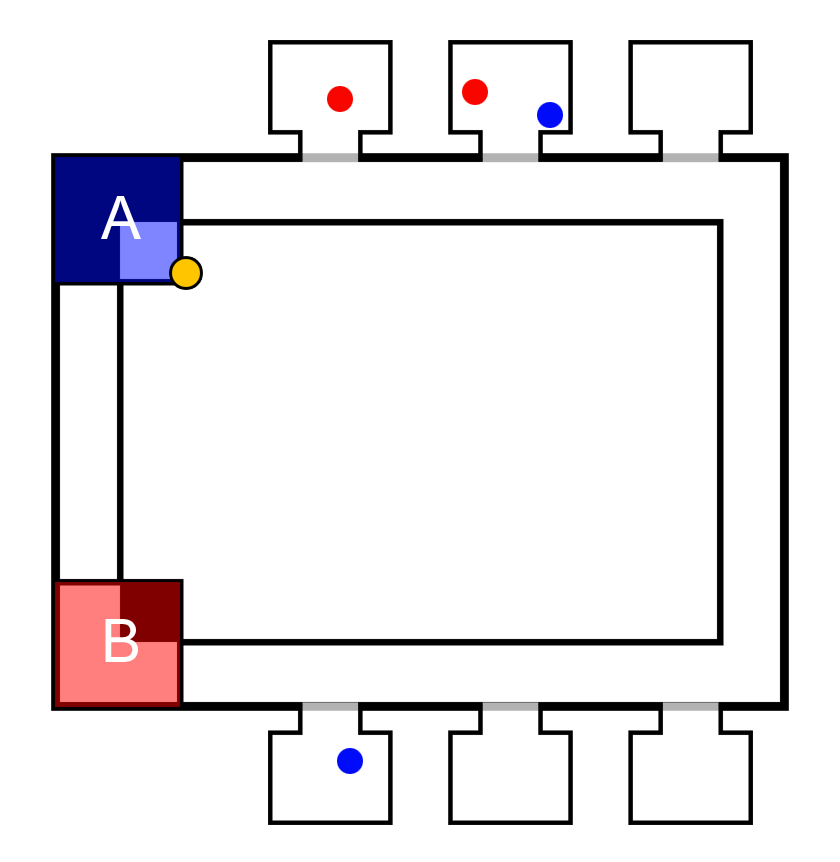
<style>
.page{position:relative;width:840px;height:862px;background:#ffffff}
.page>*{position:absolute;margin:0}
.t1{font:60px "ArialMT";letter-spacing:0.025em;color:#ffffff}
</style>
<div class="page">
<p class="t1" style="left:101px;top:196px;width:40px;height:43px">A</p>
<p class="t1" style="left:105px;top:619px;width:33px;height:43px">B</p>
</div>
